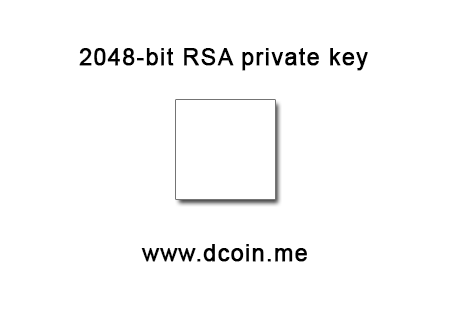
<style>
.page{position:relative;width:451px;height:311px;background:#ffffff}
.page>*{position:absolute;margin:0}
.t1{font:23px "ArialMT";letter-spacing:0.04em;color:#000000;font-weight:bold}
</style>
<div class="page">
<p class="t1" style="left:79px;top:48px;width:289px;height:23px">2048-bit RSA private key</p>
</div>
